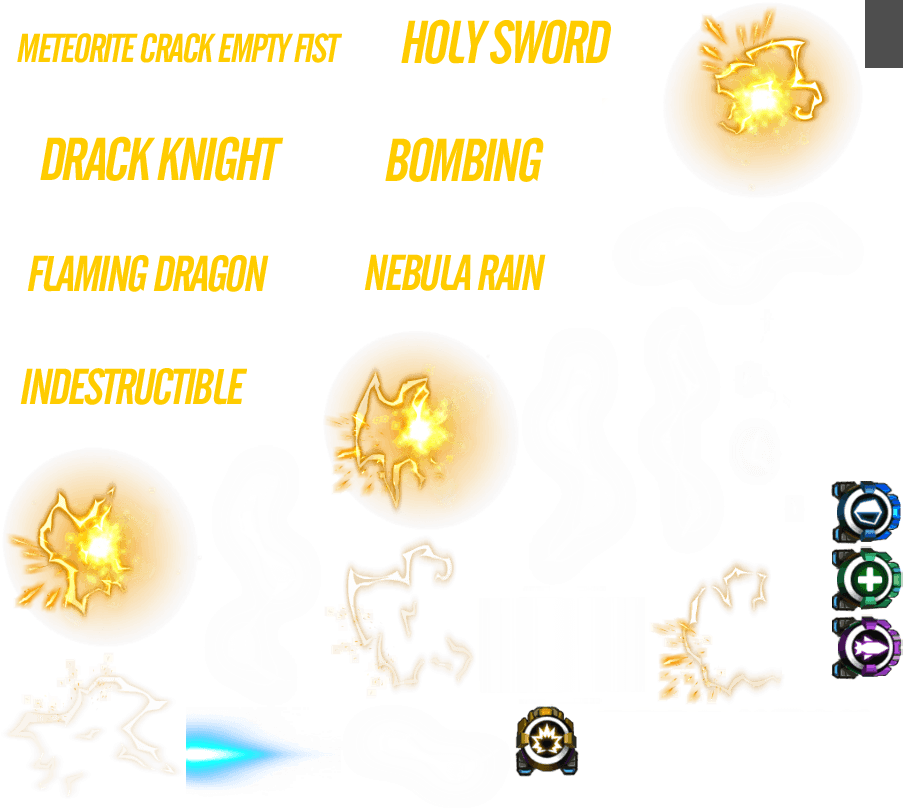
<style>
.page{position:relative;width:903px;height:809px;background:#ffffff}
.page>*{position:absolute;margin:0}
.t1{font:60px "UTM-Cafeta";letter-spacing:-0.05em;color:#ffcc00;text-transform:uppercase;font-style:italic}
.t2{font:40px "UTM-Cafeta";letter-spacing:-0.05em;color:#ffcc00;text-transform:uppercase;font-style:italic}
.t3{font:50px "UTM-Cafeta";letter-spacing:-0.05em;color:#ffcc00;text-transform:uppercase;font-style:italic}
</style>
<div class="page">
<p class="t1" style="left:401px;top:19px;width:210px;height:45px">holy sword</p>
<p class="t2" style="left:17px;top:33px;width:325px;height:30px">meteorite crack empty fist</p>
<p class="t1" style="left:40px;top:136px;width:244px;height:45px">drack knight</p>
<p class="t1" style="left:385px;top:137px;width:159px;height:45px">bombing</p>
<p class="t3" style="left:27px;top:255px;width:242px;height:37px">flaming dragon</p>
<p class="t3" style="left:364px;top:254px;width:182px;height:37px">nebula rain</p>
<p class="t3" style="left:20px;top:368px;width:227px;height:37px">indestructible</p>
</div>
